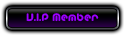
<style>
.page{position:relative;width:125px;height:35px}
.page>*{position:absolute;margin:0}
.t1{font:11px "Teacher_A";color:#9c00ff}
</style>
<div class="page">
<p class="t1" style="left:26px;top:13px;width:73px;height:9px">V.I.P Member</p>
</div>
